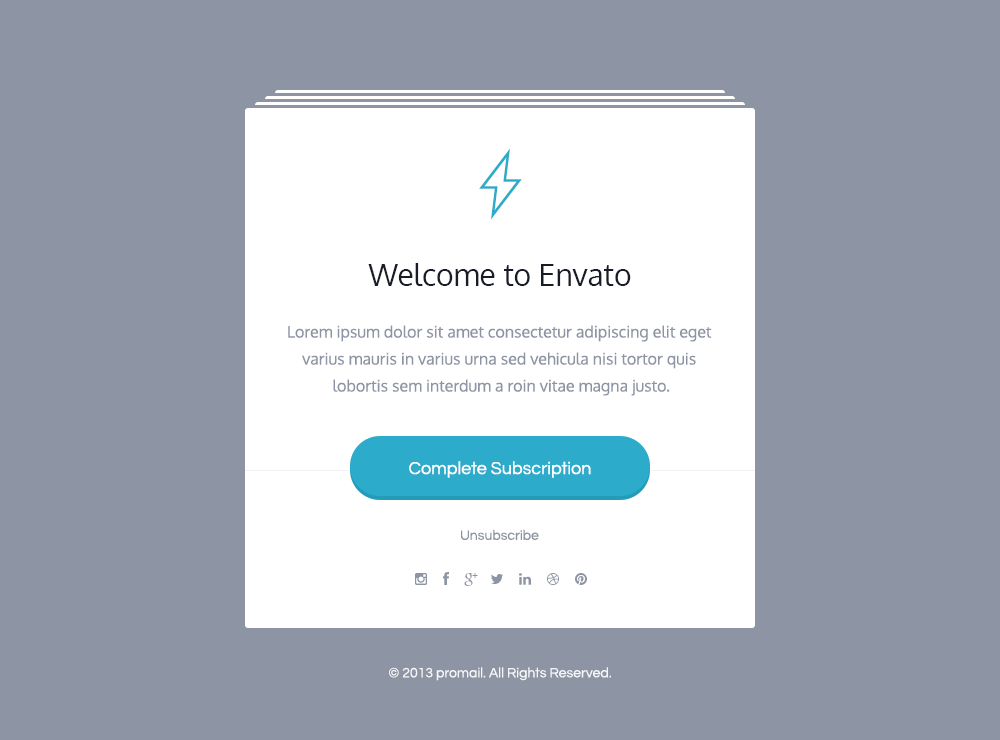
<style>
.page{position:relative;width:1000px;height:740px;background:#8d94a3}
.page>*{position:absolute;margin:0}
.t1{font:30px "Oxygen-Regular";color:#181c27}
.t2{font:16px/27px "Oxygen-Regular";color:#8d94a3}
.t3{font:18px "Questrial-Regular";color:#ffffff}
.t4{font:14px "Questrial-Regular";color:#8d94a3}
.t5{font:14px "Questrial-Regular";color:#ffffff}
</style>
<div class="page">
<p class="t1" style="left:368px;top:263px;width:263px;height:23px">Welcome to Envato</p>
<p class="t2" style="left:288px;top:325px;width:424px;height:71px;text-align:center">Lorem ipsum dolor sit amet consectetur adipiscing elit eget varius mauris in varius urna sed vehicula nisi tortor quis<br> lobortis sem interdum a roin vitae magna justo.</p>
<p class="t3" style="left:409px;top:461px;width:182px;height:17px">Complete Subscription</p>
<p class="t4" style="left:461px;top:529px;width:78px;height:11px">Unsubscribe</p>
<p class="t5" style="left:389px;top:667px;width:222px;height:14px;opacity:0.9">© 2013 promail. All Rights Reserved.</p>
</div>
